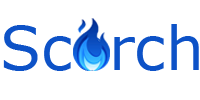
<style>
.page{position:relative;width:200px;height:100px;background:#ffffff}
.page>*{position:absolute;margin:0}
.t1{font:60px "Verdana";color:#0d52c7}
</style>
<div class="page">
<p class="t1" style="left:3px;top:24px;width:196px;height:47px">Scorch</p>
</div>
